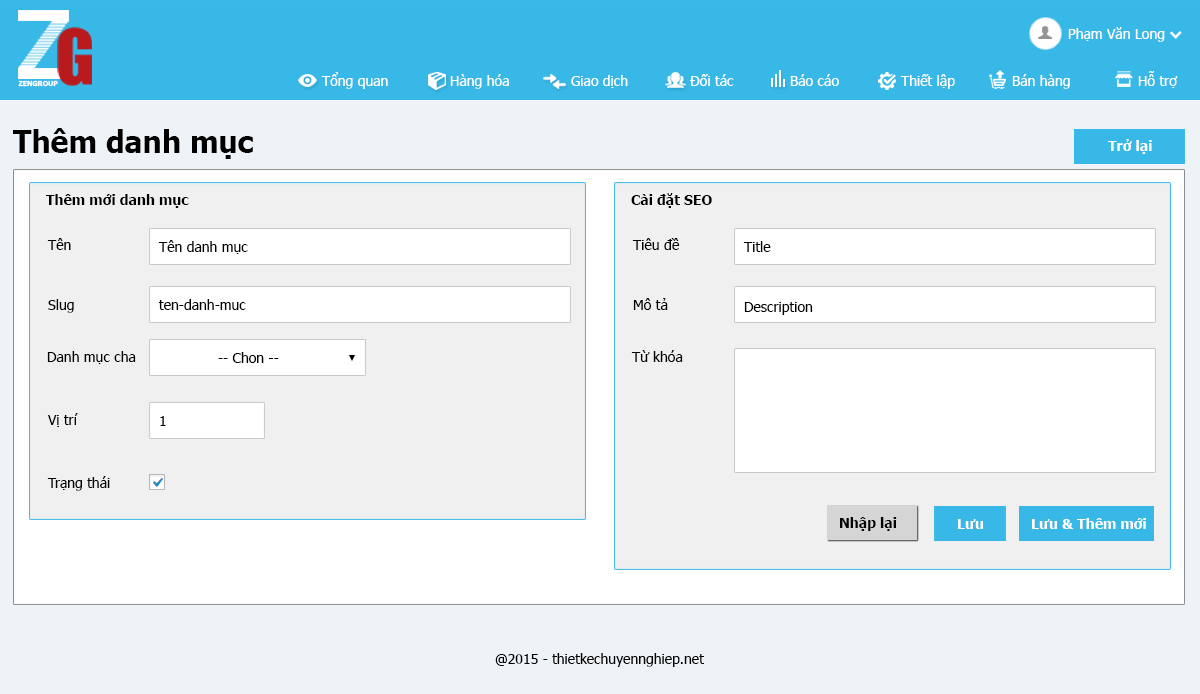
<style>
.page{position:relative;width:1200px;height:694px;background:#ffffff}
.page>*{position:absolute;margin:0}
.t1{font:14px "Tahoma";color:#ffffff}
.t2{font:7.1px "Tahoma-Bold";color:#ffffff}
.t3{font:30.8px "Tahoma-Bold";color:#000000}
.t4{font:14.4px "Tahoma-Bold";color:#ffffff}
.t5{font:14.4px "Tahoma-Bold";color:#000000}
.t6{font:14.4px "Tahoma";color:#000000}
</style>
<div class="page">
<p class="t1" style="left:1068px;top:27px;width:97px;height:15px">Phạm Văn Long</p>
<p class="t1" style="left:321px;top:72px;width:67px;height:17px">Tổng quan</p>
<p class="t1" style="left:450px;top:74px;width:59px;height:15px">Hàng hóa</p>
<p class="t1" style="left:571px;top:75px;width:57px;height:13px">Giao dịch</p>
<p class="t1" style="left:690px;top:74px;width:44px;height:12px">Đối tác</p>
<p class="t1" style="left:790px;top:74px;width:49px;height:12px">Báo cáo</p>
<p class="t1" style="left:900px;top:74px;width:55px;height:15px">Thiết lập</p>
<p class="t1" style="left:1012px;top:74px;width:58px;height:15px">Bán hàng</p>
<p class="t1" style="left:1138px;top:71px;width:40px;height:17px">Hỗ trợ</p>
<p class="t2" style="left:18px;top:80px;width:40px;height:7px">ZENGROUP</p>
<p class="t3" style="left:13px;top:128px;width:240px;height:31px">Thêm danh mục</p>
<p class="t4" style="left:1108px;top:139px;width:44px;height:15px">Trở lại</p>
<p class="t5" style="left:46px;top:194px;width:143px;height:14px">Thêm mới danh mục</p>
<p class="t5" style="left:631px;top:193px;width:81px;height:15px">Cài đặt SEO</p>
<p class="t6" style="left:47px;top:238px;width:24px;height:12px">Tên</p>
<p class="t6" style="left:158px;top:240px;width:90px;height:14px">Tên danh mục</p>
<p class="t6" style="left:632px;top:238px;width:48px;height:12px">Tiêu đề</p>
<p class="t6" style="left:743px;top:241px;width:28px;height:11px">Title</p>
<p class="t6" style="left:48px;top:299px;width:26px;height:14px">Slug</p>
<p class="t6" style="left:159px;top:299px;width:87px;height:11px">ten-danh-muc</p>
<p class="t6" style="left:633px;top:298px;width:35px;height:12px">Mô tả</p>
<p class="t6" style="left:744px;top:302px;width:69px;height:13px">Description</p>
<p class="t6" style="left:47px;top:351px;width:89px;height:13px">Danh mục cha</p>
<p class="t6" style="left:218px;top:352px;width:61px;height:11px">-- Chon --</p>
<p class="t6" style="left:631px;top:350px;width:52px;height:12px">Từ khóa</p>
<p class="t6" style="left:47px;top:413px;width:31px;height:14px">Vị trí</p>
<p class="t6" style="left:160px;top:416px;width:6px;height:10px">1</p>
<p class="t6" style="left:47px;top:476px;width:63px;height:15px">Trạng thái</p>
<p class="t5" style="left:840px;top:517px;width:57px;height:14px">Nhập lại</p>
<p class="t4" style="left:958px;top:519px;width:25px;height:10px">Lưu</p>
<p class="t4" style="left:1032px;top:518px;width:114px;height:11px">Lưu &amp; Thêm mới</p>
<p class="t6" style="left:495px;top:653px;width:209px;height:14px">@2015 - thietkechuyennghiep.net</p>
</div>
